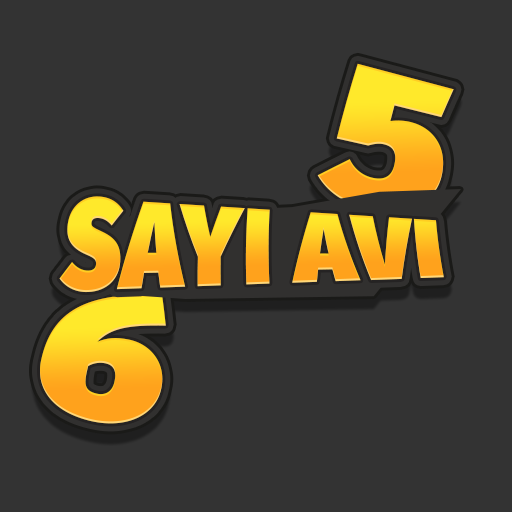
<style>
.page{position:relative;width:512px;height:512px;background:#333333}
.page>*{position:absolute;margin:0}
.t1{font:180.9px "FiraSans-Ultra";letter-spacing:0.01em;scale:1.25 1}
.t2{font:80.2px "FiraSans-Ultra";letter-spacing:0.01em;scale:1.25 1}
.t3{font:178.1px "FiraSans-Ultra";letter-spacing:0.01em;scale:1.25 1}
</style>
<div class="page">
<p class="t1" style="left:317px;top:63px;width:137px;height:149px;rotate:12deg">5</p>
<p class="t2" style="left:59px;top:196px;width:385px;height:97px">SAYI AVI</p>
<p class="t3" style="left:40px;top:294px;width:126px;height:130px;rotate:-168deg">9</p>
</div>
